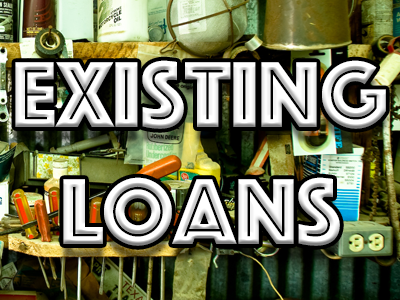
<style>
.page{position:relative;width:400px;height:300px}
.page>*{position:absolute;margin:0}
.t1{font:97px "Phosphate-Inline";color:#ffffff}
</style>
<div class="page">
<p class="t1" style="left:15px;top:60px;width:371px;height:186px;text-align:center">existing<br>Loans</p>
</div>
